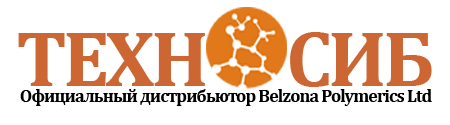
<style>
.page{position:relative;width:450px;height:125px;background:#ffffff}
.page>*{position:absolute;margin:0}
.t1{font:80px "Cambria-Bold";letter-spacing:-0.05em;color:#cc6633}
.t2{font:18px "Cambria-Bold";letter-spacing:-0.05em;color:#000000}
</style>
<div class="page">
<p class="t1" style="left:18px;top:32px;width:414px;height:55px">ТЕХН      СИБ</p>
<p class="t2" style="left:20px;top:89px;width:412px;height:17px">Официальный дистрибьютор Belzona Polymerics Ltd</p>
</div>
